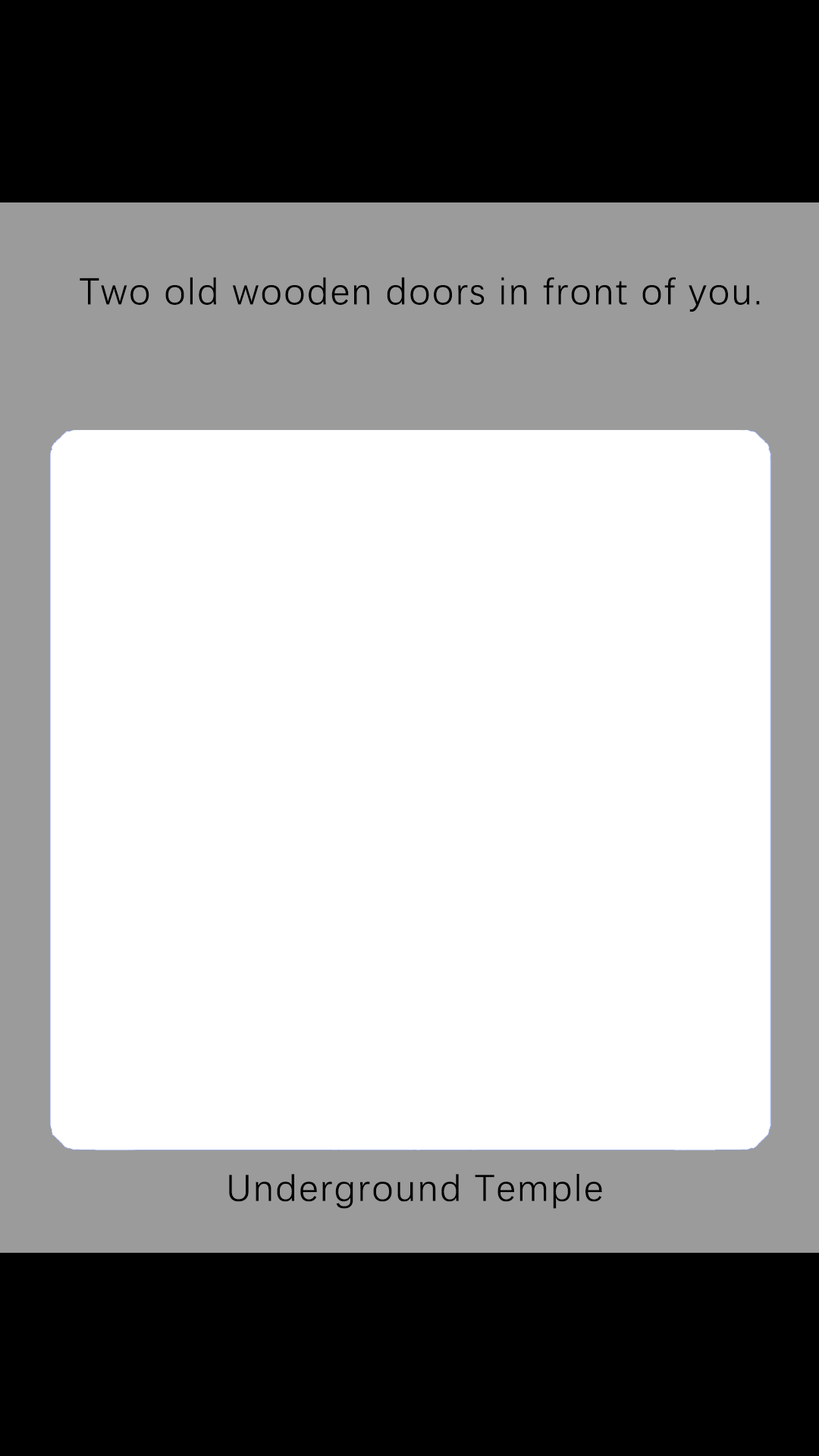
<style>
.page{position:relative;width:819px;height:1456px;background:#ffffff}
.page>*{position:absolute;margin:0}
.t1{font:37.9px "DengXian-Regular";letter-spacing:0.04em;color:#000000}
</style>
<div class="page">
<p class="t1" style="left:80px;top:277px;width:680px;height:35px">Two old wooden doors in front of you.</p>
<p class="t1" style="left:229px;top:1174px;width:373px;height:35px">Underground Temple</p>
</div>
